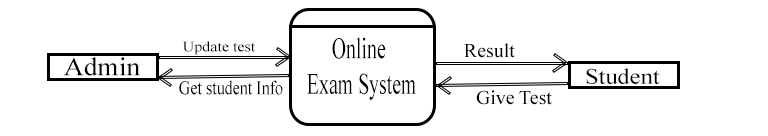
<style>
.page{position:relative;width:768px;height:136px;background:#ffffff}
.page>*{position:absolute;margin:0}
.t1{font:14.3px "TimesNewRomanPSMT";color:#000000;scale:1.12 1}
.t2{font:29.7px "TimesNewRomanPSMT";color:#000000;scale:0.67 1}
.t3{font:19.8px "TimesNewRomanPSMT";color:#000000}
.t4{font:25.6px "TimesNewRomanPSMT";color:#000000;scale:1.07 1}
.t5{font:22.2px "TimesNewRomanPSMT";color:#000000;scale:1.1 1}
.t6{font:19.8px "TimesNewRomanPSMT";color:#000000;scale:0.81 1}
</style>
<div class="page">
<p class="t1" style="left:182px;top:41px;width:74px;height:14px">Update test</p>
<p class="t2" style="left:307px;top:37px;width:109px;height:63px">Online <br>Exam System</p>
<p class="t3" style="left:464px;top:43px;width:51px;height:15px">Result</p>
<p class="t4" style="left:64px;top:57px;width:76px;height:19px">Admin</p>
<p class="t5" style="left:586px;top:68px;width:74px;height:16px">Student</p>
<p class="t6" style="left:179px;top:80px;width:104px;height:15px">Get student Info</p>
<p class="t3" style="left:476px;top:90px;width:76px;height:15px">Give Test</p>
</div>
